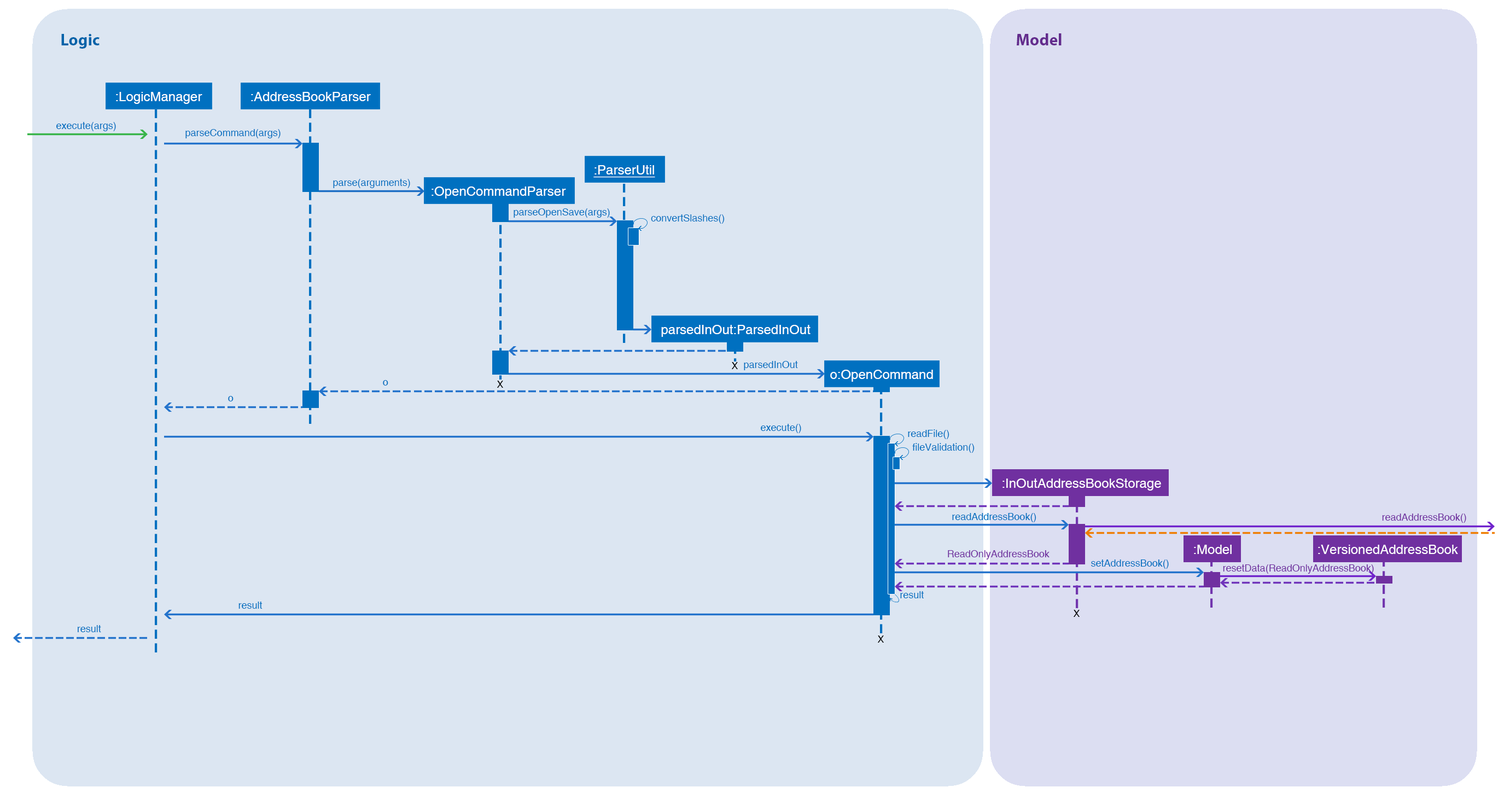
<style>
.page{position:relative;width:1504px;height:793px;background:#dce6f2}
.page>*{position:absolute;margin:0}
.t1{font:16.4px "MyriadPro-Bold";color:#0163a9}
.t2{font:16.4px "MyriadPro-Bold";color:#632b8d}
.t3{font:13.1px "Helvetica";color:#ffffff}
.t4{font:9.8px "Helvetica";color:#0070c0}
.t5{font:13.1px "Helvetica";color:#ffffff;text-decoration:underline}
.t6{font:9.8px "Helvetica";color:#000000}
.t7{font:9.8px "Helvetica";color:#7030a0}
</style>
<div class="page">
<p class="t1" style="left:61px;top:34px;width:39px;height:15px">Logic</p>
<p class="t2" style="left:1017px;top:33px;width:44px;height:12px">Model</p>
<p class="t3" style="left:116px;top:92px;width:86px;height:12px">:LogicManager</p>
<p class="t3" style="left:251px;top:92px;width:120px;height:9px">:AddressBookParser</p>
<p class="t4" style="left:56px;top:122px;width:60px;height:9px">execute(args)</p>
<p class="t4" style="left:185px;top:129px;width:96px;height:9px">parseCommand(args)</p>
<p class="t5" style="left:593px;top:165px;width:62px;height:13px">:ParserUtil</p>
<p class="t4" style="left:333px;top:179px;width:77px;height:9px">parse(arguments)</p>
<p class="t3" style="left:431px;top:186px;width:135px;height:13px">:OpenCommandParser</p>
<p class="t4" style="left:513px;top:208px;width:97px;height:10px">parseOpenSave(args)</p>
<p class="t4" style="left:651px;top:214px;width:74px;height:10px">convertSlashes()</p>
<p class="t3" style="left:661px;top:325px;width:149px;height:12px">parsedInOut:ParsedInOut</p>
<p class="t6" style="left:731px;top:362px;width:7px;height:7px">X</p>
<p class="t4" style="left:744px;top:361px;width:54px;height:9px">parsedInOut</p>
<p class="t3" style="left:830px;top:370px;width:103px;height:12px">o:OpenCommand</p>
<p class="t4" style="left:383px;top:380px;width:5px;height:6px">o</p>
<p class="t6" style="left:497px;top:381px;width:6px;height:7px">X</p>
<p class="t4" style="left:228px;top:396px;width:6px;height:5px">o</p>
<p class="t4" style="left:761px;top:424px;width:40px;height:9px">execute()</p>
<p class="t4" style="left:908px;top:429px;width:41px;height:10px">readFile()</p>
<p class="t4" style="left:912px;top:443px;width:62px;height:10px">fileValidation()</p>
<p class="t3" style="left:1002px;top:478px;width:159px;height:13px">:InOutAddressBookStorage</p>
<p class="t4" style="left:952px;top:513px;width:84px;height:9px">readAddressBook()</p>
<p class="t7" style="left:1382px;top:513px;width:84px;height:10px">readAddressBook()</p>
<p class="t3" style="left:1194px;top:545px;width:38px;height:9px">:Model</p>
<p class="t3" style="left:1318px;top:545px;width:140px;height:9px">:VersionedAddressBook</p>
<p class="t7" style="left:948px;top:550px;width:101px;height:9px">ReadOnlyAddressBook</p>
<p class="t4" style="left:1091px;top:559px;width:78px;height:10px">setAddressBook()</p>
<p class="t7" style="left:1223px;top:564px;width:151px;height:10px">resetData(ReadOnlyAddressBook)</p>
<p class="t4" style="left:900px;top:591px;width:24px;height:7px">result</p>
<p class="t4" style="left:238px;top:602px;width:24px;height:7px">result</p>
<p class="t6" style="left:1073px;top:610px;width:6px;height:7px">X</p>
<p class="t4" style="left:78px;top:625px;width:23px;height:7px">result</p>
<p class="t6" style="left:877px;top:635px;width:7px;height:8px">X</p>
</div>
